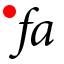
<style>
.page{position:relative;width:64px;height:64px;background:#ffffff}
.page>*{position:absolute;margin:0}
.t1{font:52.4px "MinionPro-It";color:#000000}
</style>
<div class="page">
<p class="t1" style="left:9px;top:7px;width:45px;height:52px">fa</p>
</div>
